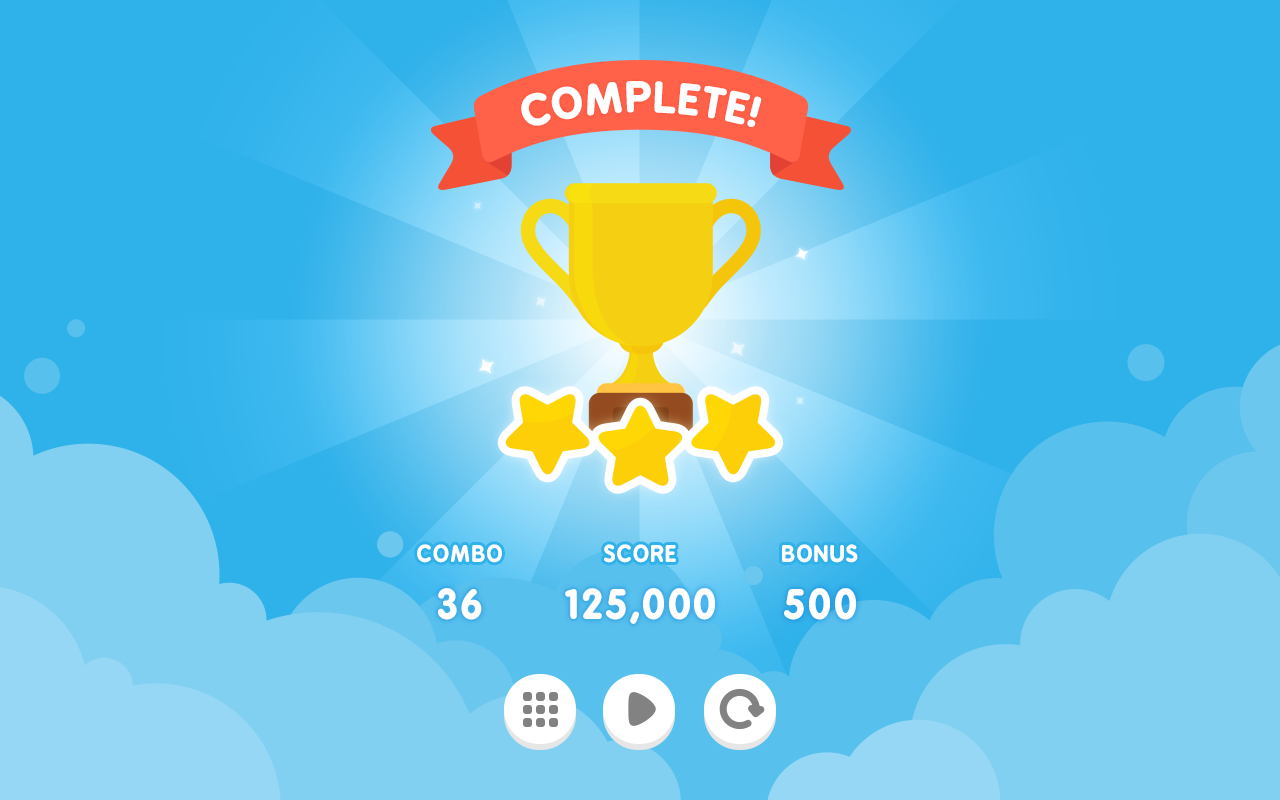
<style>
.page{position:relative;width:1280px;height:800px;background:#2fb1ea}
.page>*{position:absolute;margin:0}
.t1{font:40px "BPreplay-Bold";letter-spacing:0.05em;color:#ffffff;text-transform:uppercase}
.t2{font:22px "BPreplay-Bold";letter-spacing:0.05em;color:#ffffff;text-transform:uppercase}
.t3{font:40px "BPreplay-Bold";letter-spacing:0.05em;color:#ffffff}
</style>
<div class="page">
<p class="t1" style="left:521px;top:81px;width:241px;height:46px">Complete!</p>
<p class="t2" style="left:417px;top:544px;width:85px;height:19px">combo</p>
<p class="t2" style="left:604px;top:544px;width:72px;height:19px">score</p>
<p class="t2" style="left:782px;top:544px;width:76px;height:19px">bonus</p>
<p class="t3" style="left:438px;top:588px;width:44px;height:32px">36</p>
<p class="t3" style="left:565px;top:588px;width:150px;height:36px">125,000</p>
<p class="t3" style="left:784px;top:588px;width:72px;height:32px">500</p>
</div>
